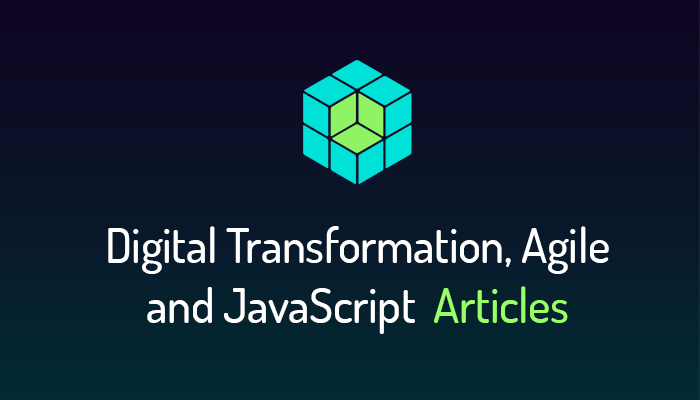
<style>
.page{position:relative;width:700px;height:400px}
.page>*{position:absolute;margin:0}
.t1{font:48px/60px "Dosis-Medium";letter-spacing:-0.01em;color:#ffffff}
.t2{font:48px/60px "Dosis-Medium";letter-spacing:-0.01em;color:#99ff66}
</style>
<div class="page">
<p class="t1" style="left:108px;top:226px;width:501px;height:108px;text-align:center">Digital Transformation, Agile <br>and JavaScript<span class="t2">  Articles</span></p>
</div>
